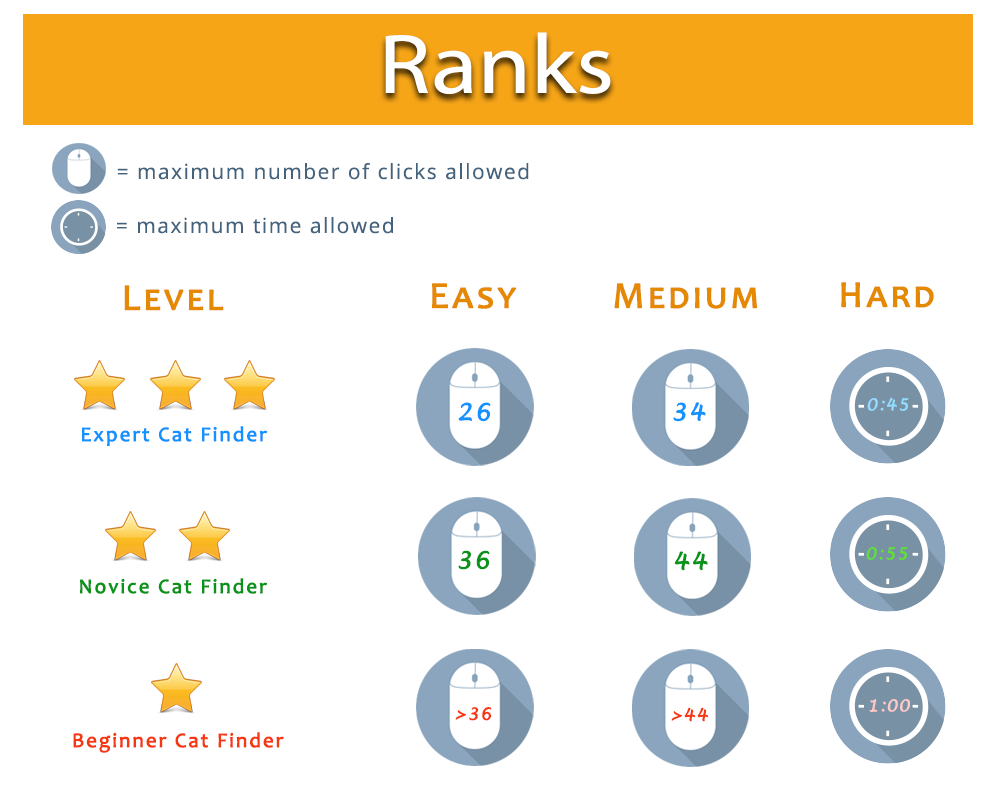
<style>
.page{position:relative;width:1000px;height:800px;background:#ffffff}
.page>*{position:absolute;margin:0}
.t1{font:85px "MyriadPro-Regular";color:#ffffff;scale:1.13 1}
.t2{font:20.8px "OpenSans";letter-spacing:0.075em;color:#43627d}
.t3{font:37.5px "Candara";letter-spacing:0.075em;color:#e68902;font-variant:small-caps;font-weight:bold}
.t4{font:16px "LucidaHandwriting-Italic";letter-spacing:0.075em;color:#92dcff;font-variant:small-caps;font-weight:bold}
.t5{font:23.3px "LucidaHandwriting-Italic";letter-spacing:0.075em;color:#1192ff;font-variant:small-caps;font-weight:bold}
.t6{font:20.8px "Candara";letter-spacing:0.075em;color:#1192ff;font-weight:bold}
.t7{font:23.3px "LucidaHandwriting-Italic";letter-spacing:0.075em;color:#099319;font-variant:small-caps;font-weight:bold}
.t8{font:16px "LucidaHandwriting-Italic";letter-spacing:0.075em;color:#5ce32d;font-variant:small-caps;font-weight:bold}
.t9{font:20.8px "Candara";letter-spacing:0.075em;color:#099319;font-weight:bold}
.t10{font:16px "LucidaHandwriting-Italic";letter-spacing:0.075em;color:#ffc9c9;font-variant:small-caps;font-weight:bold}
.t11{font:16.7px "LucidaHandwriting-Italic";letter-spacing:0.075em;color:#f63711;font-variant:small-caps;font-weight:bold}
.t12{font:20.8px "Candara";letter-spacing:0.075em;color:#f63711;font-weight:bold}
</style>
<div class="page">
<p class="t1" style="left:385px;top:32px;width:226px;height:62px">Ranks</p>
<p class="t2" style="left:117px;top:163px;width:412px;height:17px">= maximum number of clicks allowed</p>
<p class="t2" style="left:117px;top:217px;width:276px;height:17px">= maximum time allowed</p>
<p class="t3" style="left:124px;top:285px;width:100px;height:26px">Level</p>
<p class="t3" style="left:432px;top:283px;width:85px;height:26px">Easy</p>
<p class="t3" style="left:614px;top:283px;width:143px;height:26px">Medium</p>
<p class="t3" style="left:841px;top:282px;width:93px;height:26px">Hard</p>
<p class="t4" style="left:867px;top:397px;width:42px;height:14px">0:45</p>
<p class="t5" style="left:458px;top:402px;width:33px;height:20px">26</p>
<p class="t5" style="left:673px;top:402px;width:33px;height:20px">34</p>
<p class="t6" style="left:82px;top:426px;width:186px;height:20px">Expert Cat Finder</p>
<p class="t7" style="left:458px;top:550px;width:32px;height:20px">36</p>
<p class="t7" style="left:674px;top:551px;width:34px;height:20px">44</p>
<p class="t8" style="left:866px;top:547px;width:42px;height:13px">0:55</p>
<p class="t9" style="left:80px;top:578px;width:187px;height:16px">Novice Cat Finder</p>
<p class="t10" style="left:869px;top:699px;width:41px;height:13px">1:00</p>
<p class="t11" style="left:455px;top:707px;width:37px;height:14px">&gt;36</p>
<p class="t11" style="left:671px;top:707px;width:38px;height:15px">&gt;44</p>
<p class="t12" style="left:73px;top:732px;width:211px;height:21px">Beginner Cat Finder</p>
</div>
